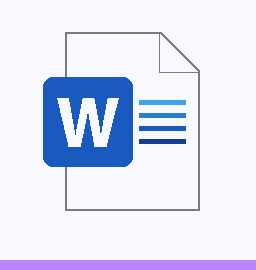
<style>
.page{position:relative;width:256px;height:270px;background:#f8f9ff}
.page>*{position:absolute;margin:0}
.t1{font:72px "MyriadPro-Bold";letter-spacing:0.32em;color:#f8f9ff}
</style>
<div class="page">
<p class="t1" style="left:57px;top:98px;width:62px;height:49px">W</p>
</div>
